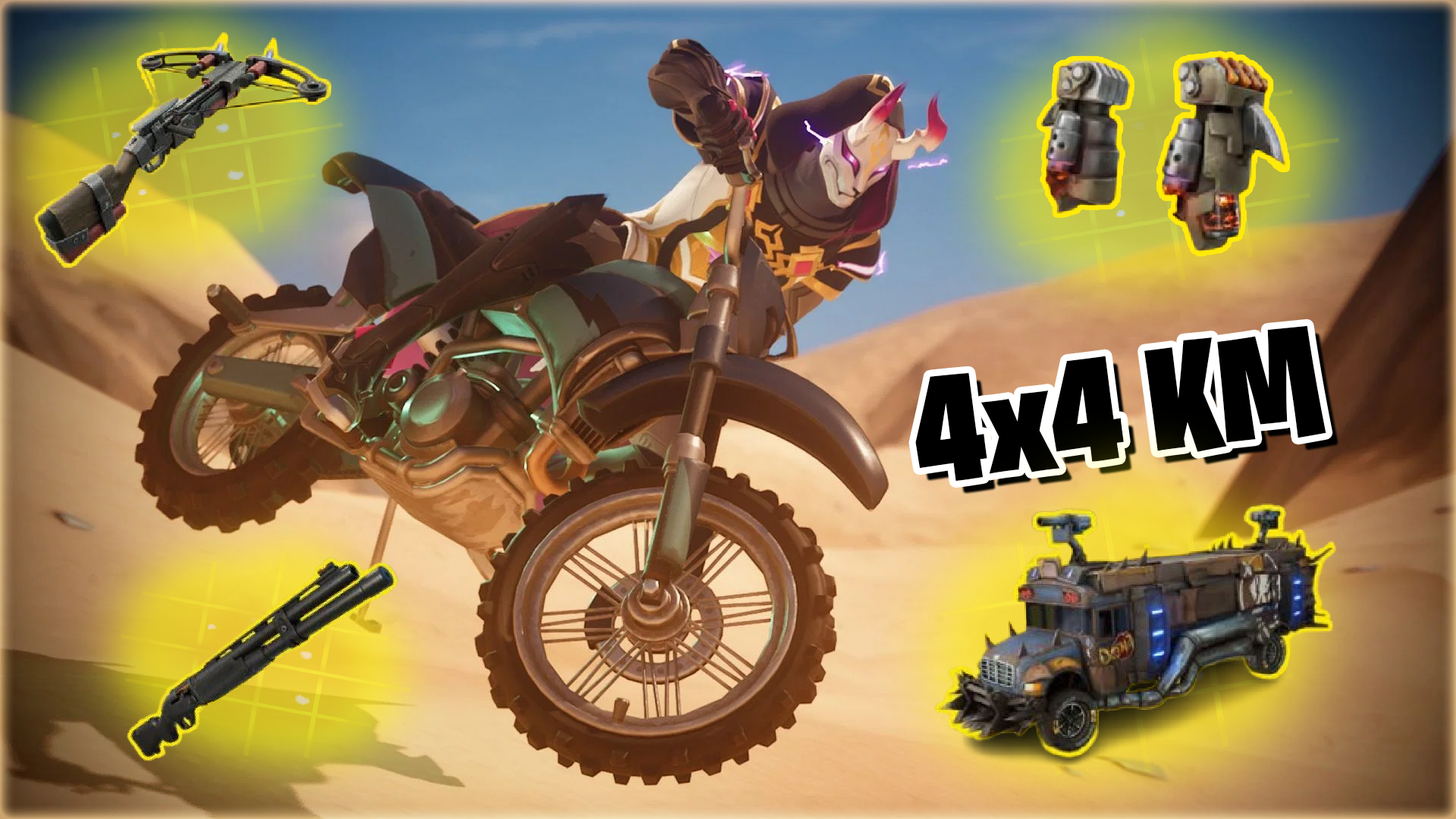
<style>
.page{position:relative;width:1456px;height:819px}
.page>*{position:absolute;margin:0}
.t1{font:151.7px "BurbankBigCondensed-Black";color:#000000}
</style>
<div class="page">
<p class="t1" style="left:915px;top:325px;width:411px;height:157px;rotate:-8deg">4x4 KM</p>
</div>
